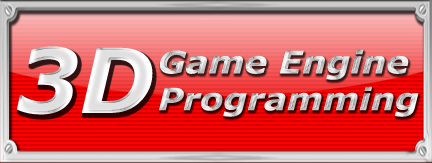
<style>
.page{position:relative;width:432px;height:163px}
.page>*{position:absolute;margin:0}
.t1{font:89.5px "Verdana-BoldItalic"}
.t2{font:30.7px "Verdana-BoldItalic";scale:1.11 1}
</style>
<div class="page">
<p class="t1" style="left:17px;top:46px;width:136px;height:69px">3D</p>
<p class="t2" style="left:159px;top:49px;width:260px;height:68px">Game Engine<br>Programming</p>
</div>
